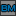
<style>
.page{position:relative;width:16px;height:16px;background:#898989}
.page>*{position:absolute;margin:0}
.t1{font:8px "Helvetica53-Extended";color:#0073b1}
</style>
<div class="page">
<p class="t1" style="left:1px;top:5px;width:15px;height:7px">BM</p>
</div>
